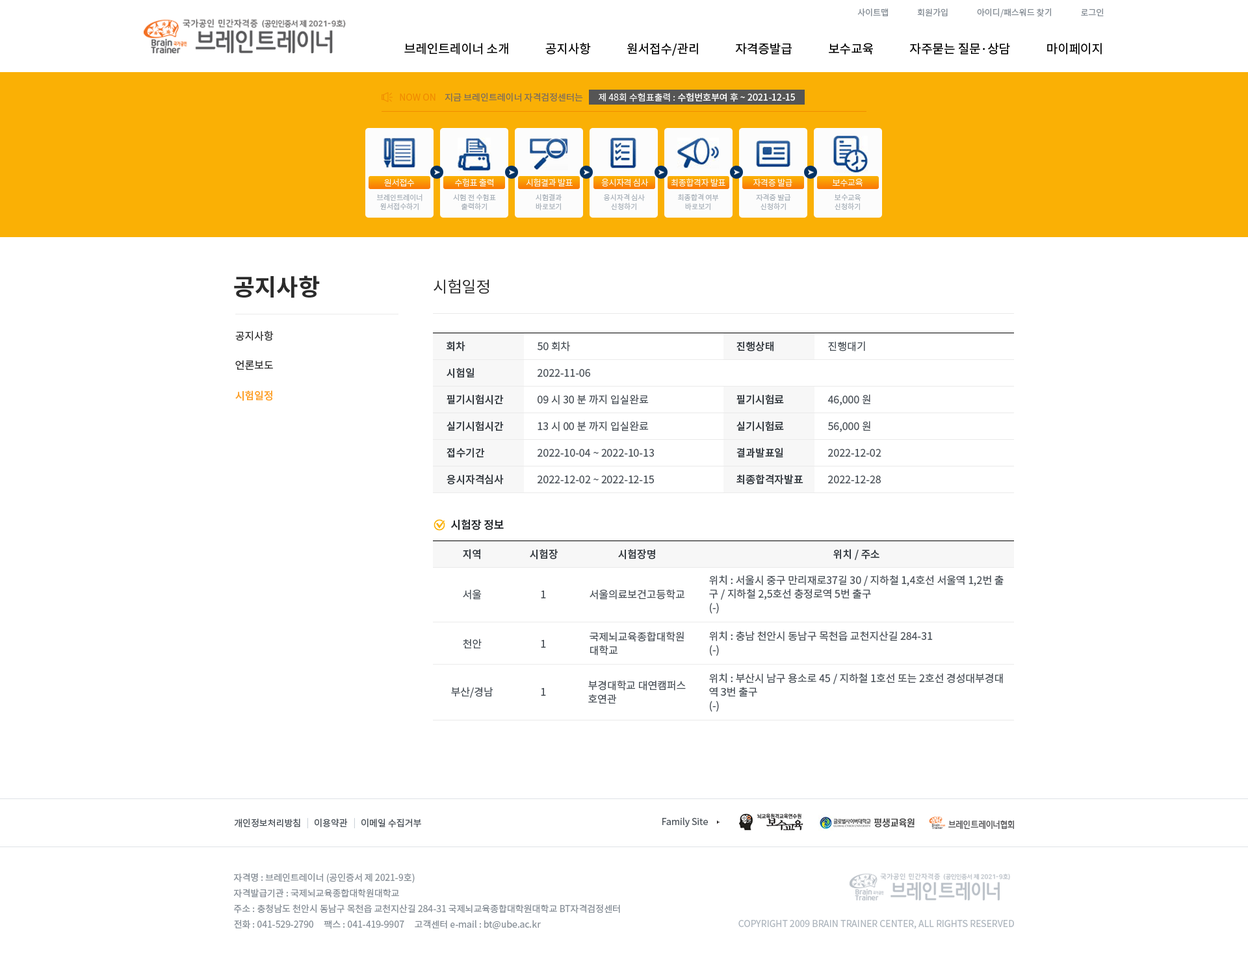
<style>
.page{position:relative;width:1248px;height:955px;background:#ffffff}
.page>*{position:absolute;margin:0}
.t1{font:8.4px "NotoSansCJKkr-Regular";letter-spacing:0.001em;color:#868e96}
.t2{font:12.3px "NotoSansCJKkr-Regular";color:#000000}
.t3{font:9.1px "NotoSansCJKkr-Regular";color:#f08c00}
.t4{font:9.1px "NotoSansCJKkr-Regular";color:#7c6d5d}
.t5{font:9.1px "NotoSansCJKkr-Medium";color:#f8f8f8}
.t6{font:9.1px "NotoSansCJKkr-Regular";color:#f8f8f8}
.t7{font:8.4px "NotoSansCJKkr-Light";letter-spacing:-0.025em;color:#fcfcfc}
.t8{font:7.1px/9.1px "NotoSansCJKkr-Regular";color:#adb5bd}
.t9{font:23.4px "NotoSansCJKkr-Bold";color:#2b2b2b}
.t10{font:15.6px "NotoSansCJKkr-Regular";color:#2b2b2b}
.t11{font:10.4px "NotoSansCJKkr-Regular";color:#2b2b2b}
.t12{font:10.4px "NotoSansCJKkr-Medium";color:#343a40}
.t13{font:10.4px "NotoSansCJKkr-Regular";color:#495057}
.t14{font:10.4px "NotoSansCJKkr-Medium";color:#fd9f27}
.t15{font:11px "NotoSansCJKkr-Medium";color:#212529}
.t16{font:10.4px/13.6px "NotoSansCJKkr-Regular";color:#495057}
.t17{font:9.1px "NotoSansCJKkr-Regular";color:#495057}
.t18{font:9.1px "NotoSansCJKkr-Regular";color:#ced4da}
.t19{font:9.1px/15.6px "NotoSansCJKkr-Regular";color:#868e96}
.t20{font:9.1px "NotoSansCJKkr-Regular";color:#adb5bd}
</style>
<div class="page">
<p class="t1" style="left:857px;top:8px;width:247px;height:10px">사이트맵               회원가입               아이디/패스워드 찾기               로그인</p>
<p class="t2" style="left:404px;top:42px;width:698px;height:14px">브레인트레이너 소개             공지사항             원서접수/관리             자격증발급             보수교육             자주묻는 질문·상담             마이페이지</p>
<p class="t3" style="left:400px;top:94px;width:35px;height:7px">NOW ON</p>
<p class="t4" style="left:445px;top:93px;width:138px;height:9px">지금 브레인트레이너 자격검정센터는</p>
<p class="t5" style="left:599px;top:93px;width:196px;height:9px"><span class="t6">제 48회 수험표출력 : </span>수험번호부여 후 ~ 2021-12-15</p>
<p class="t7" style="left:384px;top:179px;width:31px;height:8px">원서접수</p>
<p class="t7" style="left:455px;top:178px;width:38px;height:9px">수험표 출력</p>
<p class="t7" style="left:526px;top:178px;width:47px;height:9px">시험결과 발표</p>
<p class="t7" style="left:601px;top:178px;width:48px;height:9px">응시자격 심사</p>
<p class="t7" style="left:671px;top:178px;width:54px;height:9px">최종합격자 발표</p>
<p class="t7" style="left:753px;top:178px;width:39px;height:9px">자격증 발급</p>
<p class="t7" style="left:832px;top:179px;width:31px;height:8px">보수교육</p>
<p class="t8" style="left:377px;top:194px;width:45px;height:17px;text-align:center">브레인트레이너<br>원서접수하기</p>
<p class="t8" style="left:453px;top:194px;width:43px;height:17px;text-align:center">시험 전 수험표<br>출력하기</p>
<p class="t8" style="left:536px;top:194px;width:26px;height:17px;text-align:center">시험결과<br>바로보기</p>
<p class="t8" style="left:604px;top:194px;width:41px;height:17px;text-align:center">응시자격 심사<br>신청하기</p>
<p class="t8" style="left:678px;top:194px;width:41px;height:17px;text-align:center">최종합격 여부<br>바로보기</p>
<p class="t8" style="left:756px;top:194px;width:35px;height:17px;text-align:center">자격증 발급<br>신청하기</p>
<p class="t8" style="left:835px;top:194px;width:26px;height:17px;text-align:center">보수교육<br>신청하기</p>
<p class="t9" style="left:234px;top:276px;width:86px;height:22px">공지사항</p>
<p class="t10" style="left:434px;top:279px;width:55px;height:15px">시험일정</p>
<p class="t11" style="left:235px;top:331px;width:39px;height:10px">공지사항</p>
<p class="t12" style="left:447px;top:341px;width:18px;height:11px">회차</p>
<p class="t13" style="left:538px;top:341px;width:32px;height:11px">50 회차</p>
<p class="t12" style="left:736px;top:341px;width:37px;height:11px">진행상태</p>
<p class="t13" style="left:828px;top:341px;width:37px;height:11px">진행대기</p>
<p class="t11" style="left:235px;top:360px;width:38px;height:10px">언론보도</p>
<p class="t12" style="left:447px;top:368px;width:27px;height:10px">시험일</p>
<p class="t13" style="left:538px;top:369px;width:52px;height:8px">2022-11-06</p>
<p class="t14" style="left:235px;top:391px;width:37px;height:10px">시험일정</p>
<p class="t12" style="left:447px;top:395px;width:57px;height:10px">필기시험시간</p>
<p class="t13" style="left:538px;top:395px;width:111px;height:10px">09 시 30 분 까지 입실완료</p>
<p class="t12" style="left:736px;top:395px;width:48px;height:10px">필기시험료</p>
<p class="t13" style="left:827px;top:395px;width:43px;height:11px">46,000 원</p>
<p class="t12" style="left:447px;top:421px;width:57px;height:11px">실기시험시간</p>
<p class="t13" style="left:538px;top:421px;width:111px;height:11px">13 시 00 분 까지 입실완료</p>
<p class="t12" style="left:736px;top:421px;width:48px;height:11px">실기시험료</p>
<p class="t13" style="left:828px;top:421px;width:42px;height:11px">56,000 원</p>
<p class="t12" style="left:447px;top:448px;width:38px;height:10px">접수기간</p>
<p class="t13" style="left:538px;top:449px;width:116px;height:8px">2022-10-04 ~ 2022-10-13</p>
<p class="t12" style="left:736px;top:448px;width:47px;height:10px">결과발표일</p>
<p class="t13" style="left:828px;top:449px;width:53px;height:8px">2022-12-02</p>
<p class="t12" style="left:447px;top:474px;width:57px;height:11px">응시자격심사</p>
<p class="t13" style="left:538px;top:476px;width:116px;height:8px">2022-12-02 ~ 2022-12-15</p>
<p class="t12" style="left:736px;top:474px;width:67px;height:11px">최종합격자발표</p>
<p class="t13" style="left:828px;top:476px;width:53px;height:8px">2022-12-28</p>
<p class="t15" style="left:451px;top:519px;width:53px;height:11px">시험장 정보</p>
<p class="t12" style="left:463px;top:549px;width:17px;height:11px">지역</p>
<p class="t12" style="left:530px;top:549px;width:28px;height:11px">시험장</p>
<p class="t12" style="left:618px;top:549px;width:37px;height:11px">시험장명</p>
<p class="t12" style="left:833px;top:549px;width:46px;height:11px">위치 / 주소</p>
<p class="t16" style="left:709px;top:575px;width:295px;height:39px">위치 : 서울시 중구 만리재로37길 30 / 지하철 1,4호선 서울역 1,2번 출<br>구 / 지하철 2,5호선 충정로역 5번 출구<br>(-)</p>
<p class="t13" style="left:463px;top:590px;width:19px;height:10px">서울</p>
<p class="t13" style="left:541px;top:591px;width:5px;height:8px">1</p>
<p class="t13" style="left:590px;top:590px;width:94px;height:10px">서울의료보건고등학교</p>
<p class="t13" style="left:463px;top:639px;width:19px;height:10px">천안</p>
<p class="t13" style="left:541px;top:640px;width:5px;height:8px">1</p>
<p class="t16" style="left:590px;top:632px;width:94px;height:24px">국제뇌교육종합대학원<br>대학교</p>
<p class="t16" style="left:709px;top:631px;width:224px;height:25px">위치 : 충남 천안시 동남구 목천읍 교천지산길 284-31<br>(-)</p>
<p class="t16" style="left:709px;top:673px;width:294px;height:39px">위치 : 부산시 남구 용소로 45 / 지하철 1호선 또는 2호선 경성대부경대<br>역 3번 출구<br>(-)</p>
<p class="t13" style="left:451px;top:687px;width:42px;height:11px">부산/경남</p>
<p class="t13" style="left:541px;top:688px;width:5px;height:8px">1</p>
<p class="t16" style="left:588px;top:681px;width:98px;height:23px">부경대학교 대연캠퍼스<br>호연관</p>
<p class="t17" style="left:234px;top:819px;width:66px;height:9px">개인정보처리방침</p>
<p class="t18" style="left:307px;top:818px;width:1px;height:11px">|</p>
<p class="t17" style="left:315px;top:819px;width:33px;height:9px">이용약관</p>
<p class="t18" style="left:354px;top:818px;width:1px;height:11px">|</p>
<p class="t17" style="left:361px;top:819px;width:60px;height:9px">이메일 수집거부</p>
<p class="t17" style="left:662px;top:818px;width:46px;height:9px">Family Site</p>
<p class="t19" style="left:233px;top:874px;width:387px;height:56px">자격명 : 브레인트레이너 (공인증서 제 2021-9호)<br>자격발급기관 : 국제뇌교육종합대학원대학교<br>주소 : 충청남도 천안시 동남구 목천읍 교천지산길 284-31 국제뇌교육종합대학원대학교 BT자격검정센터<br>전화 : 041-529-2790     팩스 : 041-419-9907     고객센터 e-mail : bt@ube.ac.kr</p>
<p class="t20" style="left:738px;top:920px;width:276px;height:9px">COPYRIGHT 2009 BRAIN TRAINER CENTER, ALL RIGHTS RESERVED</p>
</div>
